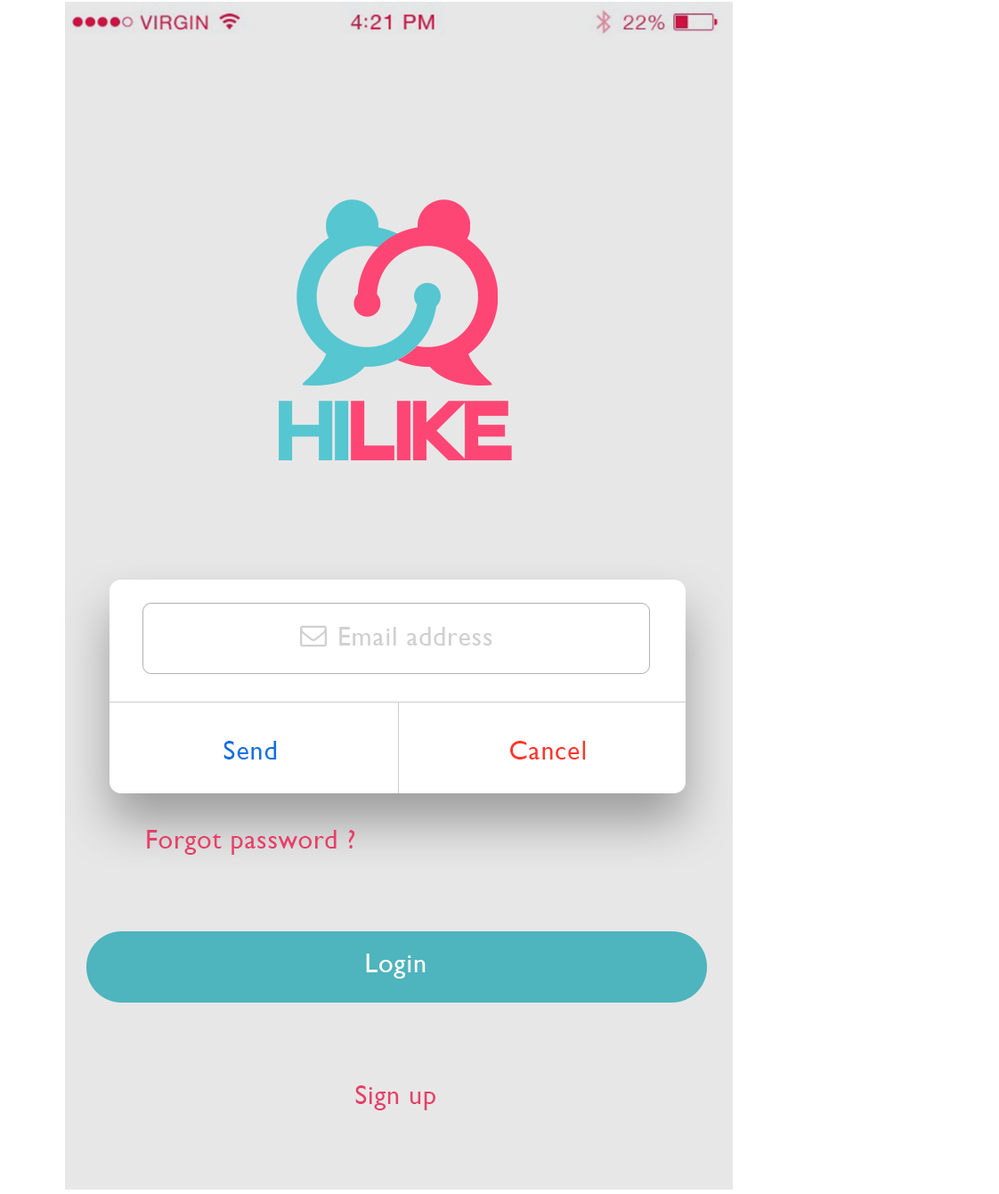
<style>
.page{position:relative;width:999px;height:1194px;background:#ffffff}
.page>*{position:absolute;margin:0}
.t1{font:89.2px "SFAutomatonCondensed";color:#fe4674}
.t2{font:89.2px "SFAutomatonCondensed";color:#56c6d1}
.t3{font:26.7px "GillSans";letter-spacing:0.029em;color:#d0d0d0}
.t4{font:26.7px "GillSans";letter-spacing:0.029em;color:#1171df}
.t5{font:26.7px "GillSans";letter-spacing:0.029em;color:#fa372d}
.t6{font:26.7px "GillSans";letter-spacing:0.029em;color:#e44069}
.t7{font:26.7px "GillSans";letter-spacing:0.029em;color:#ffffff}
.t8{font:26.7px "GillSans";letter-spacing:0.029em;color:#e5406a}
</style>
<div class="page">
<p class="t1" style="left:279px;top:401px;width:233px;height:59px"><span class="t2">HI</span>LIKE</p>
<p class="t3" style="left:339px;top:627px;width:153px;height:18px">Email address</p>
<p class="t4" style="left:223px;top:741px;width:54px;height:18px">Send</p>
<p class="t5" style="left:510px;top:741px;width:76px;height:18px">Cancel</p>
<p class="t6" style="left:147px;top:830px;width:208px;height:25px">Forgot password ?</p>
<p class="t7" style="left:366px;top:953px;width:60px;height:25px">Login</p>
<p class="t8" style="left:355px;top:1085px;width:80px;height:25px">Sign up</p>
</div>
